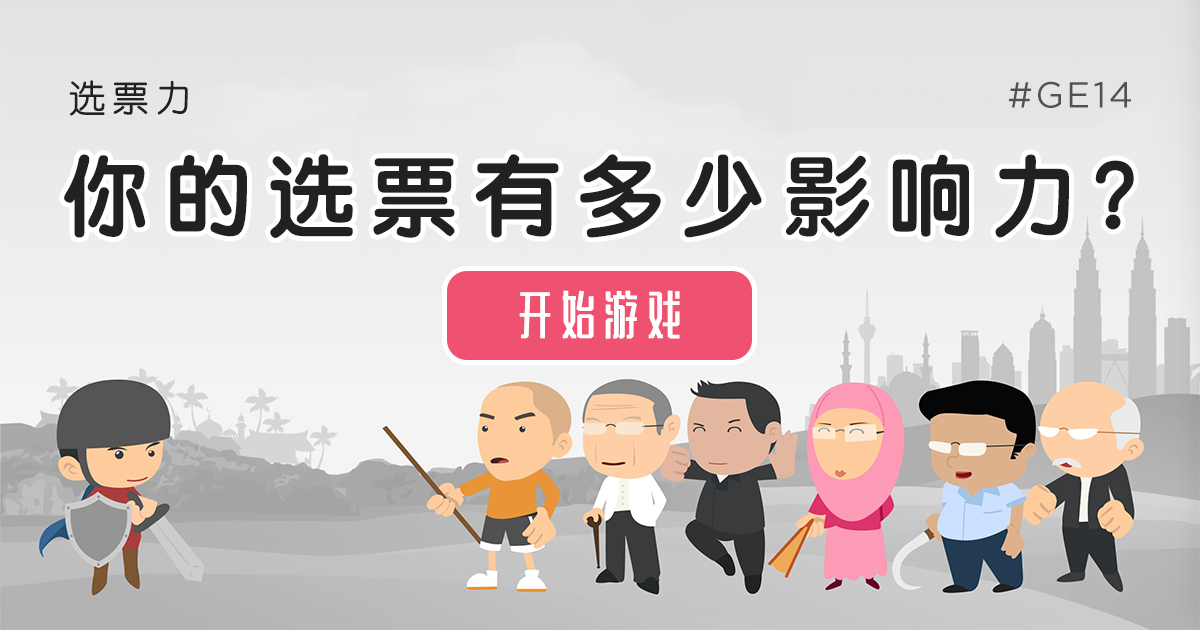
<style>
.page{position:relative;width:1200px;height:630px}
.page>*{position:absolute;margin:0}
.t1{font:36px "STYuanti-SC-Regular";letter-spacing:0.2em;color:#212121}
.t2{font:36px "Gotham-Book";letter-spacing:0.075em;color:#515151}
.t3{font:86px "STYuanti-SC-Bold";letter-spacing:0.2em;color:#212121}
.t4{font:48px "MFJiaHei_Noncommercial-Regular";letter-spacing:0.2em;color:#ffffff}
</style>
<div class="page">
<p class="t1" style="left:69px;top:80px;width:119px;height:36px">选票力</p>
<p class="t2" style="left:1009px;top:81px;width:122px;height:27px">#GE14</p>
<p class="t3" style="left:64px;top:154px;width:1070px;height:84px">你的选票有多少影响力？</p>
<p class="t4" style="left:519px;top:290px;width:161px;height:49px">开始游戏</p>
</div>
